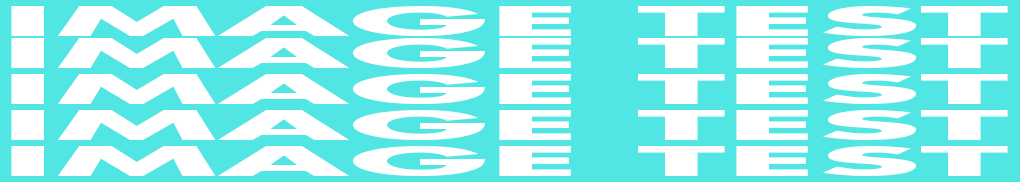
<style>
.page{position:relative;width:1020px;height:182px;background:#51e6e4}
.page>*{position:absolute;margin:0}
.t1{font:39.6px "FuturaStd-Bold";color:#ffffff;scale:4.2 1}
</style>
<div class="page">
<p class="t1" style="left:11px;top:6px;width:997px;height:30px">IMAGE TEST</p>
<p class="t1" style="left:11px;top:38px;width:997px;height:30px">IMAGE TEST</p>
<p class="t1" style="left:11px;top:74px;width:997px;height:30px">IMAGE TEST</p>
<p class="t1" style="left:11px;top:110px;width:997px;height:30px">IMAGE TEST</p>
<p class="t1" style="left:11px;top:146px;width:997px;height:30px">IMAGE TEST</p>
</div>
